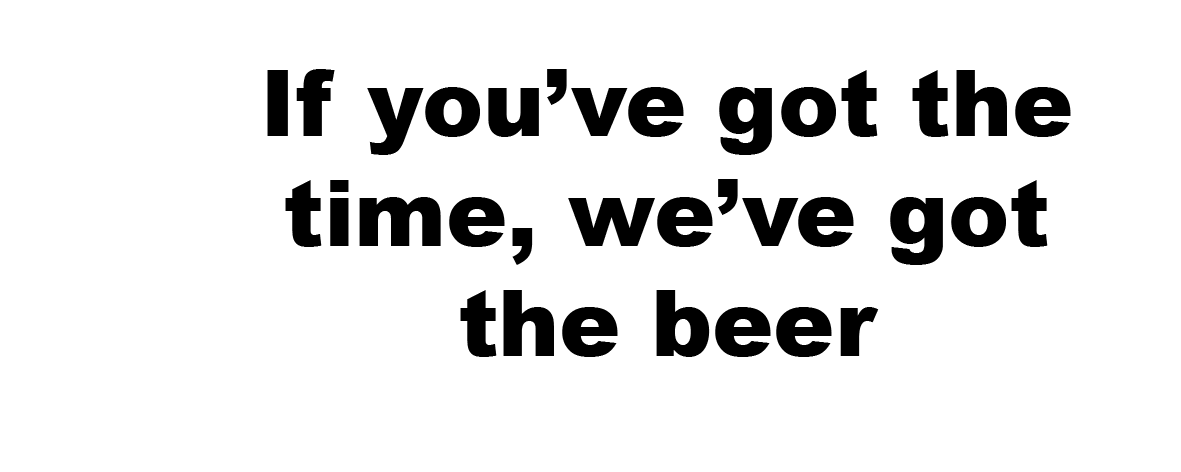
<style>
.page{position:relative;width:1181px;height:472px;background:#ffffff}
.page>*{position:absolute;margin:0}
.t1{font:91.7px "Arial-Black";color:#000000}
</style>
<div class="page">
<p class="t1" style="left:267px;top:69px;width:804px;height:288px;text-align:center">If you’ve got the time, we’ve got the beer</p>
</div>
